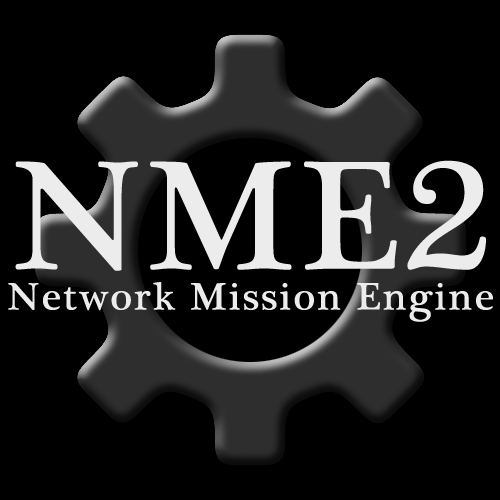
<style>
.page{position:relative;width:500px;height:500px;background:#000000}
.page>*{position:absolute;margin:0}
.t1{font:271.9px "PlantagenetCherokee";letter-spacing:0.025em;color:#ececec;scale:1.05 1}
.t2{font:67px "PlantagenetCherokee";letter-spacing:0.025em;color:#ececec;font-weight:bold;scale:1.05 1}
</style>
<div class="page">
<p class="t1" style="left:15px;top:160px;width:471px;height:111px">NME2</p>
<p class="t2" style="left:8px;top:282px;width:485px;height:40px">Network Mission Engine</p>
</div>
